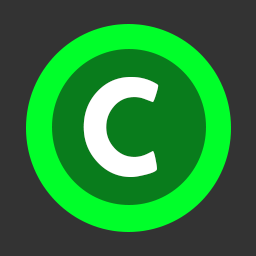
<style>
.page{position:relative;width:256px;height:256px;background:#333333}
.page>*{position:absolute;margin:0}
.t1{font:200px "BerlinSansFB-Reg";color:#ffffff}
</style>
<div class="page">
<p class="t1" style="left:83px;top:77px;width:76px;height:100px">c</p>
</div>
